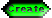
<style>
.page{position:relative;width:52px;height:18px;background:#ffffff}
.page>*{position:absolute;margin:0}
.t1{font:10px "LucidaSansUnicode";font-weight:bold}
</style>
<div class="page">
<p class="t1" style="left:7px;top:5px;width:37px;height:7px">Create</p>
</div>
